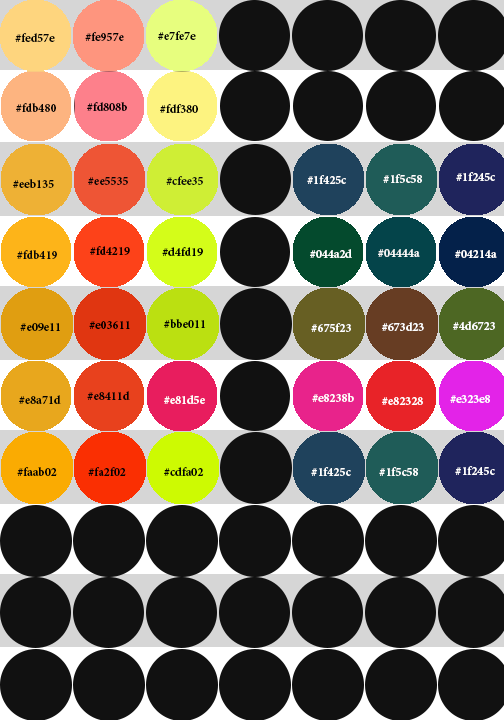
<style>
.page{position:relative;width:504px;height:720px;background:#111111}
.page>*{position:absolute;margin:0}
.t1{font:12px "MinionPro-Bold";color:#030303}
.t2{font:12px "MinionPro-Bold";color:#000000}
.t3{font:12px "MinionPro-Bold";color:#ffffff}
.t4{font:12px "MinionPro-Bold";color:#050505}
.t5{font:12px "MinionPro-Bold";color:#0c0c0c}
.t6{font:12px "MinionPro-Bold";color:#030100}
.t7{font:12px "MinionPro-Bold";color:#0a0a0a}
.t8{font:12px "MinionPro-Bold";color:#f5f6f6}
.t9{font:12px "MinionPro-Bold";color:#020202}
.t10{font:12px "MinionPro-Bold";color:#feffff}
.t11{font:12px "MinionPro-Bold";color:#fefeff}
</style>
<div class="page">
<p class="t1" style="left:15px;top:33px;width:40px;height:9px">#fed57e</p>
<p class="t1" style="left:85px;top:32px;width:39px;height:9px">#fe957e</p>
<p class="t1" style="left:158px;top:31px;width:38px;height:9px">#e7fe7e</p>
<p class="t1" style="left:87px;top:102px;width:40px;height:9px">#fd808b</p>
<p class="t1" style="left:16px;top:103px;width:40px;height:9px">#fdb480</p>
<p class="t2" style="left:160px;top:104px;width:38px;height:9px">#fdf380</p>
<p class="t3" style="left:383px;top:174px;width:39px;height:9px">#1f5c58</p>
<p class="t3" style="left:456px;top:172px;width:39px;height:9px">#1f245c</p>
<p class="t1" style="left:13px;top:179px;width:41px;height:9px">#eeb135</p>
<p class="t4" style="left:88px;top:177px;width:40px;height:8px">#ee5535</p>
<p class="t5" style="left:166px;top:176px;width:37px;height:9px">#cfee35</p>
<p class="t3" style="left:307px;top:175px;width:39px;height:9px">#1f425c</p>
<p class="t6" style="left:90px;top:246px;width:40px;height:9px">#fd4219</p>
<p class="t7" style="left:17px;top:250px;width:40px;height:9px">#fdb419</p>
<p class="t1" style="left:162px;top:247px;width:41px;height:9px">#d4fd19</p>
<p class="t3" style="left:310px;top:249px;width:42px;height:9px">#044a2d</p>
<p class="t8" style="left:378px;top:249px;width:42px;height:8px">#04444a</p>
<p class="t3" style="left:455px;top:250px;width:42px;height:8px">#04214a</p>
<p class="t9" style="left:20px;top:323px;width:40px;height:8px">#e09e11</p>
<p class="t2" style="left:89px;top:321px;width:41px;height:8px">#e03611</p>
<p class="t1" style="left:164px;top:319px;width:41px;height:9px">#bbe011</p>
<p class="t3" style="left:311px;top:323px;width:40px;height:9px">#675f23</p>
<p class="t3" style="left:382px;top:322px;width:42px;height:9px">#673d23</p>
<p class="t3" style="left:453px;top:321px;width:42px;height:9px">#4d6723</p>
<p class="t1" style="left:19px;top:395px;width:42px;height:9px">#e8a71d</p>
<p class="t1" style="left:87px;top:391px;width:43px;height:9px">#e8411d</p>
<p class="t3" style="left:164px;top:395px;width:41px;height:9px">#e81d5e</p>
<p class="t3" style="left:312px;top:393px;width:42px;height:9px">#e8238b</p>
<p class="t3" style="left:382px;top:397px;width:41px;height:8px">#e82328</p>
<p class="t3" style="left:450px;top:395px;width:40px;height:8px">#e323e8</p>
<p class="t1" style="left:17px;top:467px;width:40px;height:9px">#faab02</p>
<p class="t1" style="left:88px;top:467px;width:38px;height:9px">#fa2f02</p>
<p class="t1" style="left:164px;top:467px;width:40px;height:9px">#cdfa02</p>
<p class="t10" style="left:311px;top:467px;width:40px;height:9px">#1f425c</p>
<p class="t3" style="left:379px;top:467px;width:39px;height:9px">#1f5c58</p>
<p class="t11" style="left:455px;top:466px;width:40px;height:9px">#1f245c</p>
</div>
